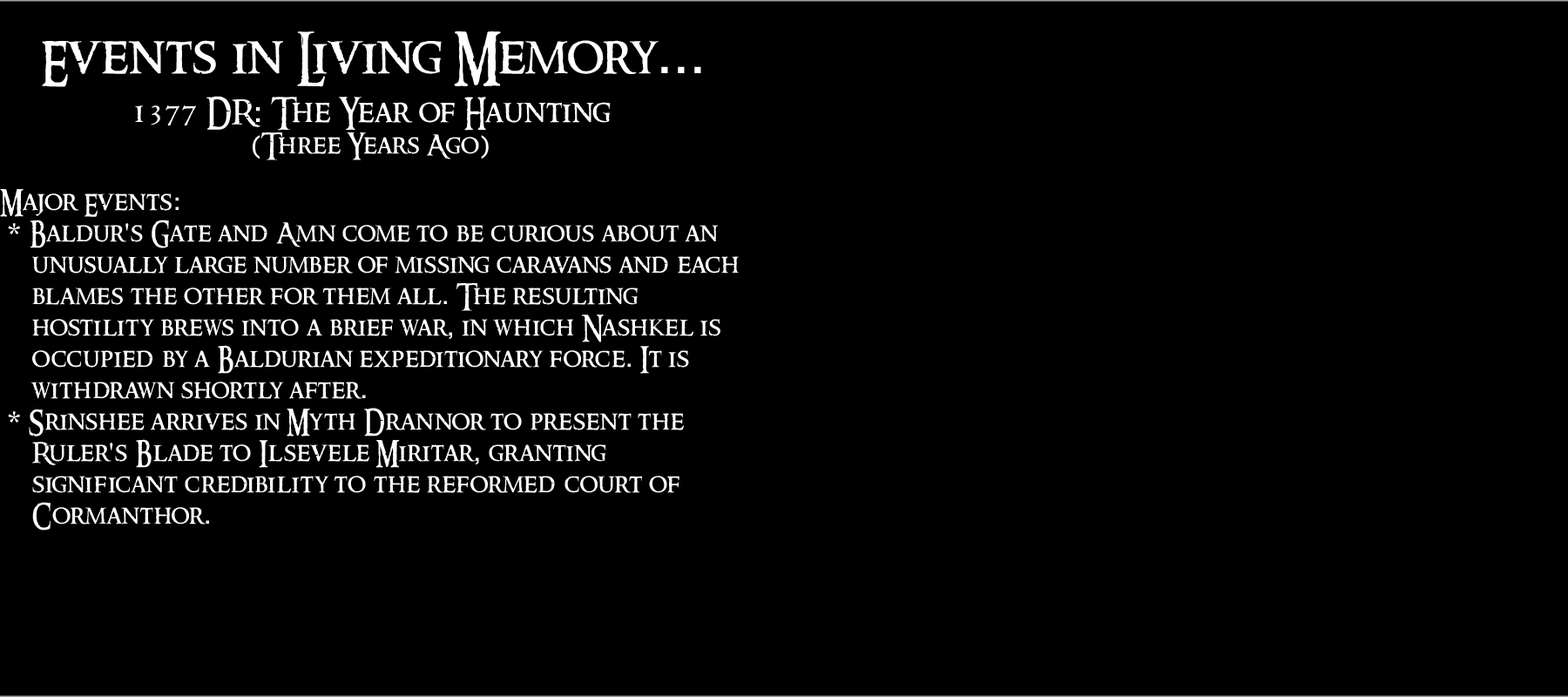
<style>
.page{position:relative;width:1568px;height:697px;background:#000000}
.page>*{position:absolute;margin:0}
.t1{font:26.1px "RingbearerMedium";letter-spacing:0.025em;color:#ffffff}
.t2{font:15.7px "RingbearerMedium";letter-spacing:0.025em;color:#ffffff}
.t3{font:52.3px "RingbearerMedium";letter-spacing:0.025em;color:#ffffff}
.t4{font:52.3px "Rockwell";letter-spacing:0.025em;color:#ffffff}
.t5{font:31.4px "RingbearerMedium";letter-spacing:0.025em;color:#ffffff}
.t6{font:31.4px "Rockwell";letter-spacing:0.025em;color:#ffffff}
.t7{font:26.1px "Rockwell";letter-spacing:0.025em;color:#ffffff}
</style>
<div class="page">
<p class="t1" style="left:0px;top:31px;width:739px;height:500px;text-align:center"><span class="t2"><br></span><span class="t3">Events in Living Memory</span><span class="t4">...<br><br></span><span class="t5">1377 DR</span><span class="t6">:</span><span class="t5"> The Year of Haunting<br></span><span class="t7">(</span>Three Years Ago<span class="t7">)<br><br></span>Major Events<span class="t7">:<br> * </span>Baldur<span class="t7">'</span>s Gate and Amn come to be curious about an <br> unusually large number of missing caravans and each <br> blames the other for them all<span class="t7">.</span> The resulting <br> hostility brews into a brief war<span class="t7">,</span> in which Nashkel is <br> occupied by a Baldurian expeditionary force<span class="t7">.</span> It is <br> withdrawn shortly after<span class="t7">.<br> * </span>Srinshee arrives in Myth Drannor to present the <br> Ruler<span class="t7">'</span>s Blade to Ilsevele Miritar<span class="t7">,</span> granting <br> significant credibility to the reformed court of <br> Cormanthor<span class="t7">.</span></p>
</div>
